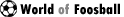
<style>
.page{position:relative;width:124px;height:17px;background:#ffffff}
.page>*{position:absolute;margin:0}
.t1{font:15px "TwCenMT-CondensedExtraBold";color:#000000}
.t2{font:15px "TwCenMT-CondensedExtraBold";color:#878787}
</style>
<div class="page">
<p class="t1" style="left:20px;top:3px;width:100px;height:12px">World <span class="t2">of</span> Foosball</p>
</div>
